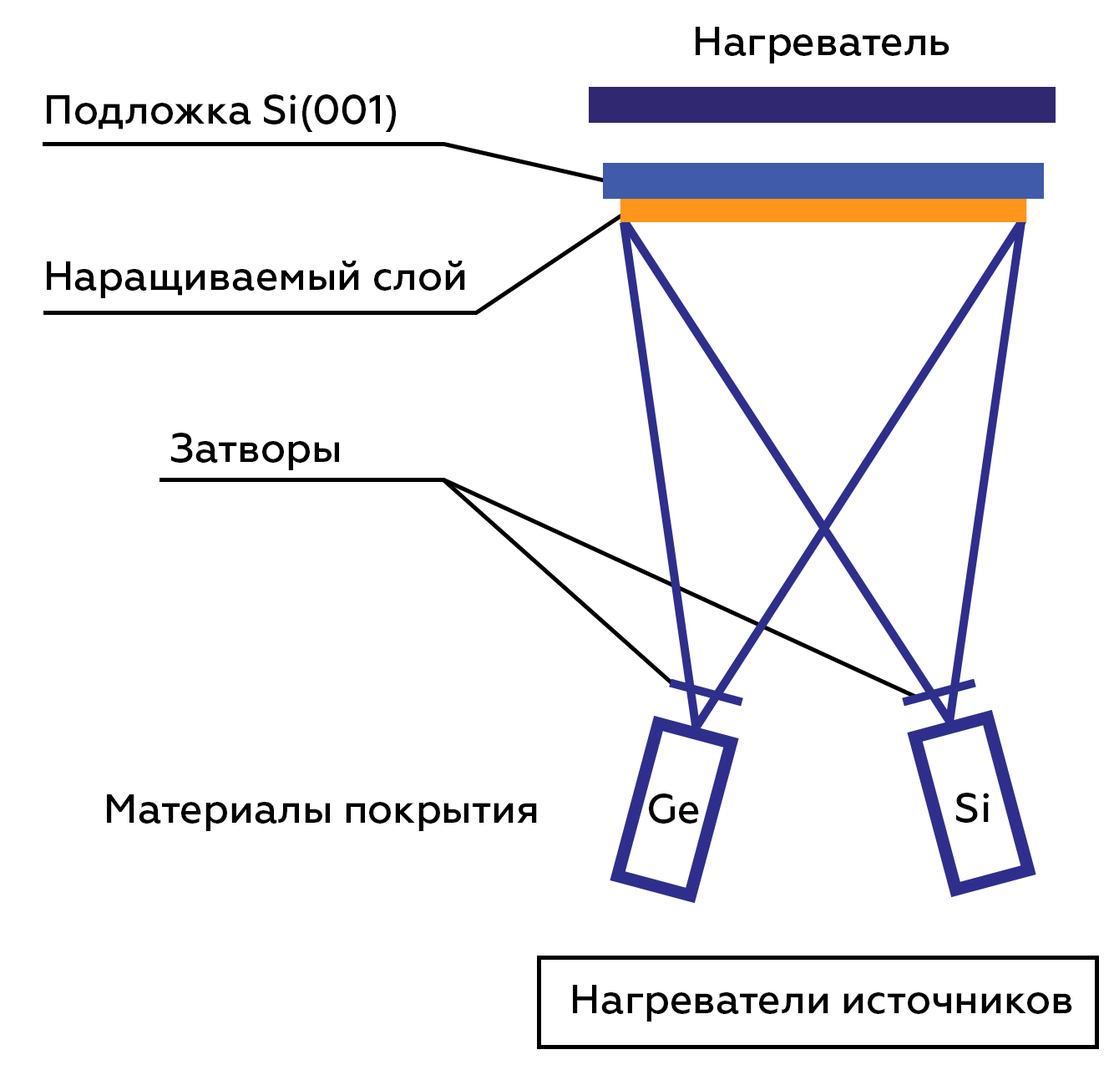
<style>
.page{position:relative;width:1109px;height:1075px;background:#ffffff}
.page>*{position:absolute;margin:0}
.t1{font:40.1px "Geometria-Medium";color:#000000}
</style>
<div class="page">
<p class="t1" style="left:696px;top:27px;width:254px;height:36px">Нагреватель</p>
<p class="t1" style="left:47px;top:94px;width:349px;height:38px">Подложка Si(001)</p>
<p class="t1" style="left:47px;top:261px;width:418px;height:37px">Наращиваемый слой</p>
<p class="t1" style="left:170px;top:433px;width:169px;height:37px">Затворы</p>
<p class="t1" style="left:107px;top:794px;width:430px;height:37px">Материалы покрытия</p>
<p class="t1" style="left:649px;top:794px;width:50px;height:30px">Ge</p>
<p class="t1" style="left:956px;top:793px;width:33px;height:30px">Si</p>
<p class="t1" style="left:573px;top:985px;width:499px;height:37px">Нагреватели источников</p>
</div>
